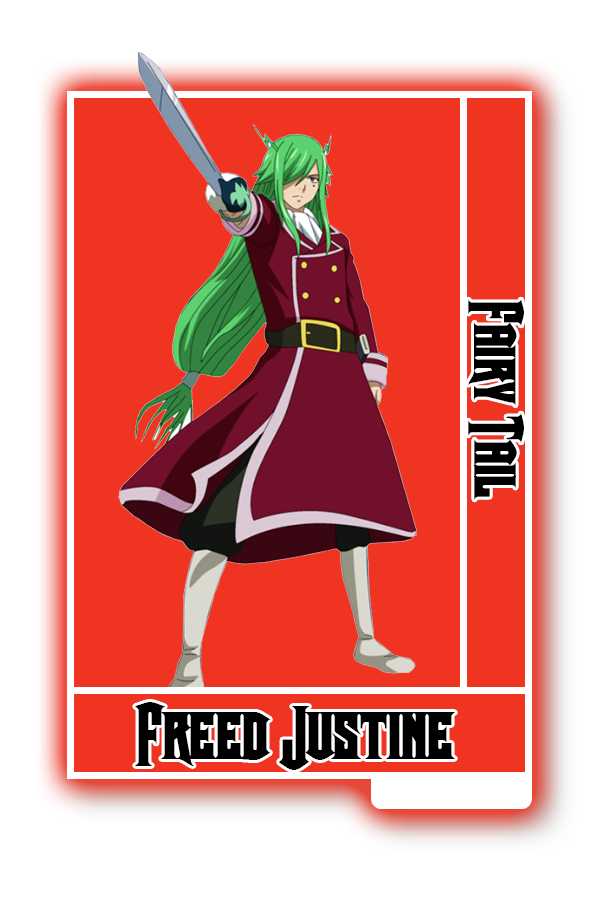
<style>
.page{position:relative;width:600px;height:900px;background:#ef3422}
.page>*{position:absolute;margin:0}
.t1{font:61.5px "Crown-Title";color:#000000}
.t2{font:70.1px "Crown-Title";color:#000000}
</style>
<div class="page">
<p class="t1" style="left:468px;top:299px;width:56px;height:201px;rotate:90deg">Fairy Tail</p>
<p class="t2" style="left:135px;top:702px;width:320px;height:68px">Freed Justine</p>
</div>
